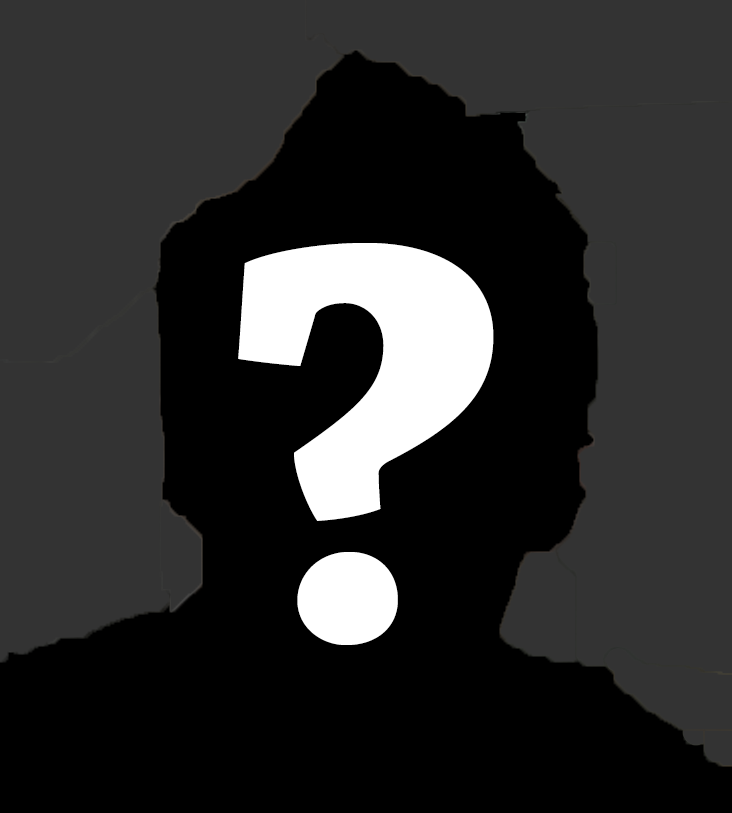
<style>
.page{position:relative;width:732px;height:813px;background:#000000}
.page>*{position:absolute;margin:0}
.t1{font:600px "ChaparralPro-Bold";color:#ffffff}
</style>
<div class="page">
<p class="t1" style="left:238px;top:243px;width:256px;height:402px">?</p>
</div>
